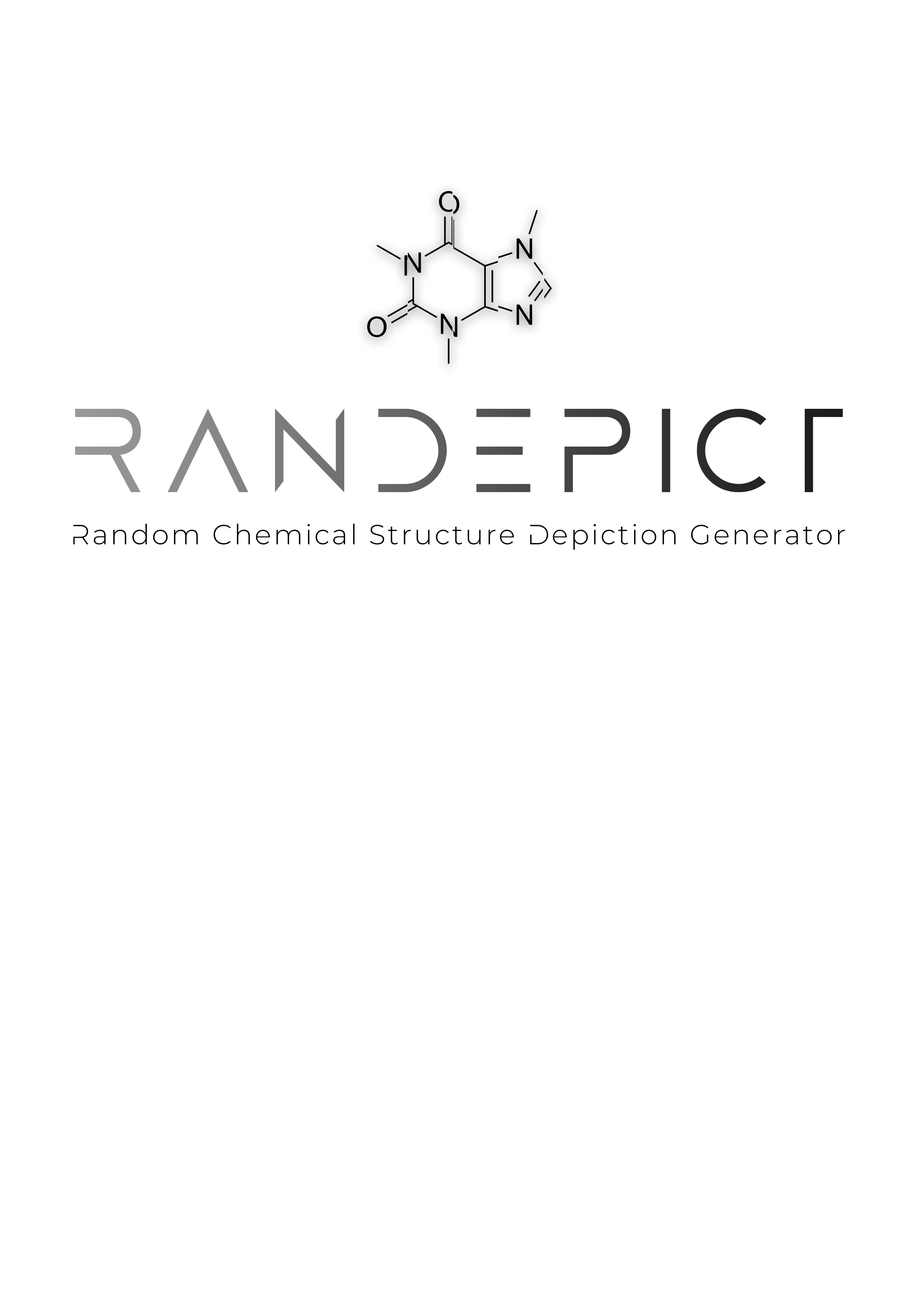
<style>
.page{position:relative;width:918px;height:1299px;background:#ffffff}
.page>*{position:absolute;margin:0}
.t1{font:27.8px "MontserratLightAlt1Light";letter-spacing:0.075em;color:#000000}
</style>
<div class="page">
<p class="t1" style="left:73px;top:523px;width:772px;height:27px">Random Chemical Structure Depiction Generator</p>
</div>
